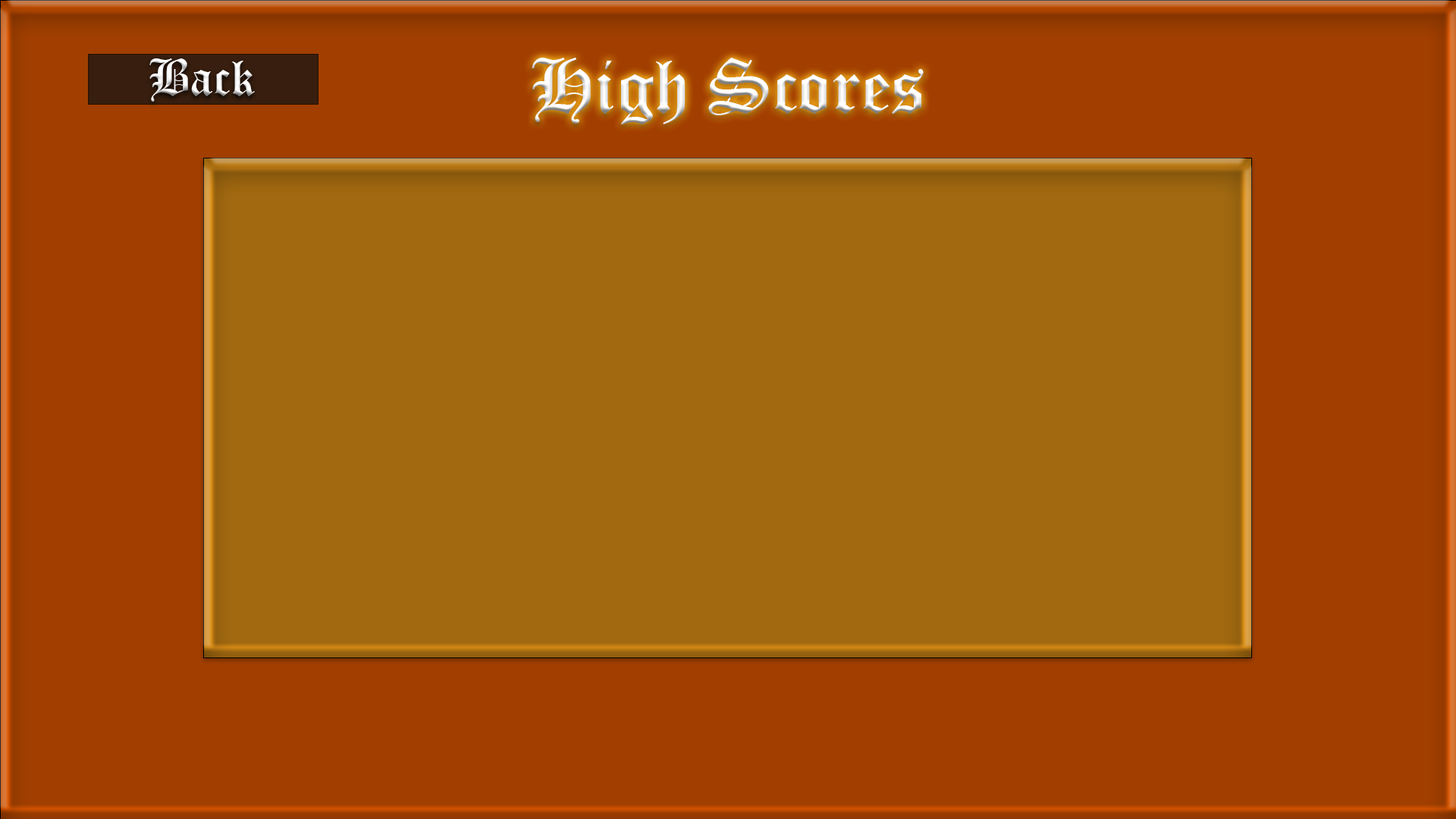
<style>
.page{position:relative;width:1456px;height:819px;background:#a23f00}
.page>*{position:absolute;margin:0}
.t1{font:50.6px "OldEnglishTextMT";color:#ffffff}
.t2{font:75.8px "OldEnglishTextMT";color:#ffffff}
</style>
<div class="page">
<p class="t1" style="left:149px;top:58px;width:106px;height:44px">Back</p>
<p class="t2" style="left:532px;top:58px;width:392px;height:67px">High Scores</p>
</div>
